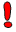
<style>
.page{position:relative;width:16px;height:32px;background:#ffffff}
.page>*{position:absolute;margin:0}
.t1{font:38.2px "ActionMan";color:#ff0000;scale:1.39 1}
</style>
<div class="page">
<p class="t1" style="left:4px;top:2px;width:8px;height:25px;rotate:-8deg">!</p>
</div>
